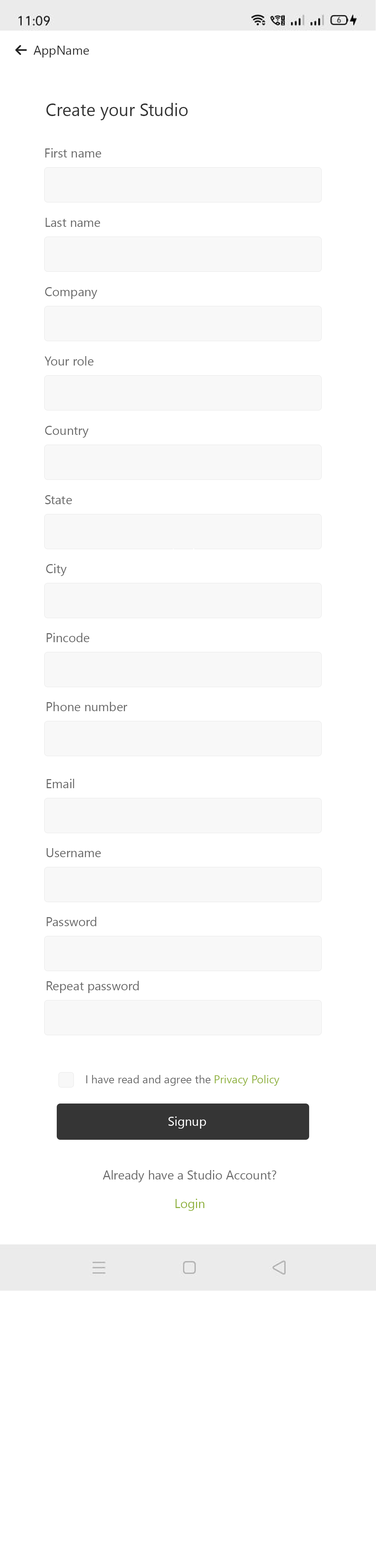
<style>
.page{position:relative;width:376px;height:1568px;background:#ffffff}
.page>*{position:absolute;margin:0}
.t1{font:12.5px "SegoeUI";color:#333333}
.t2{font:17.4px "SegoeUI";color:#333333}
.t3{font:12.5px "SegoeUI";color:#6a6a6a}
.t4{font:11.2px "SegoeUI";color:#6a6a6a}
.t5{font:11.2px "SegoeUI";color:#8fb13d}
.t6{font:12.5px "SegoeUI";color:#ffffff}
.t7{font:12.5px "SegoeUI";color:#8fb13d}
</style>
<div class="page">
<p class="t1" style="left:33px;top:46px;width:56px;height:11px">AppName</p>
<p class="t2" style="left:46px;top:103px;width:142px;height:17px">Create your Studio</p>
<p class="t3" style="left:45px;top:148px;width:56px;height:9px">First name</p>
<p class="t3" style="left:46px;top:218px;width:54px;height:9px">Last name</p>
<p class="t3" style="left:45px;top:287px;width:53px;height:12px">Company</p>
<p class="t3" style="left:45px;top:356px;width:49px;height:10px">Your role</p>
<p class="t3" style="left:45px;top:426px;width:44px;height:12px">Country</p>
<p class="t3" style="left:45px;top:495px;width:27px;height:9px">State</p>
<p class="t3" style="left:46px;top:564px;width:21px;height:12px">City</p>
<p class="t3" style="left:47px;top:633px;width:43px;height:9px">Pincode</p>
<p class="t3" style="left:47px;top:702px;width:81px;height:9px">Phone number</p>
<p class="t3" style="left:47px;top:779px;width:27px;height:9px">Email</p>
<p class="t3" style="left:47px;top:848px;width:54px;height:9px">Username</p>
<p class="t3" style="left:47px;top:917px;width:50px;height:9px">Password</p>
<p class="t3" style="left:47px;top:981px;width:92px;height:12px">Repeat password</p>
<p class="t4" style="left:86px;top:1075px;width:194px;height:11px">I have read and agree the <span class="t5">Privacy Policy</span></p>
<p class="t6" style="left:169px;top:1116px;width:37px;height:13px">Signup</p>
<p class="t3" style="left:103px;top:1170px;width:174px;height:41px;text-align:center">Already have a Studio Account?<br><br><span class="t7">Login</span></p>
</div>
